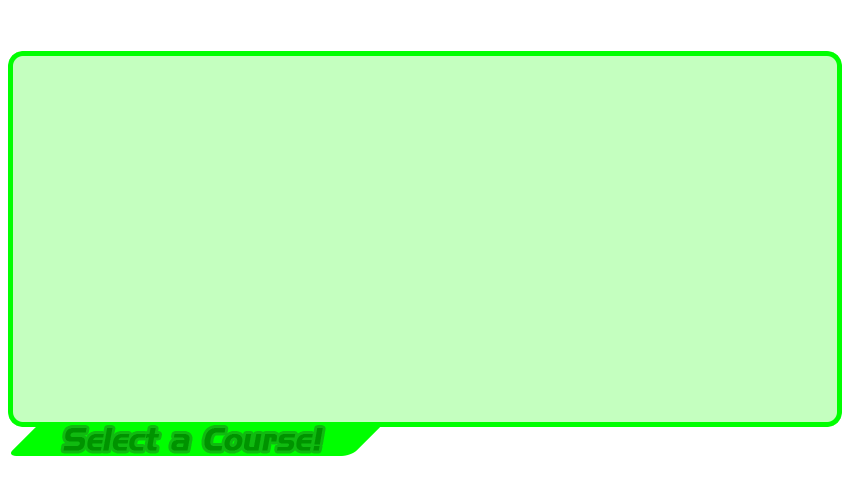
<style>
.page{position:relative;width:854px;height:480px;background:#c4ffbf}
.page>*{position:absolute;margin:0}
.t1{font:30px "HandelGothicBT-Regular";color:#009300;font-weight:bold;font-style:italic}
</style>
<div class="page">
<p class="t1" style="left:63px;top:428px;width:260px;height:23px">Select a Course!</p>
</div>
